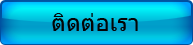
<style>
.page{position:relative;width:193px;height:45px}
.page>*{position:absolute;margin:0}
.t1{font:24px "Tahoma";color:#040404}
</style>
<div class="page">
<p class="t1" style="left:52px;top:13px;width:86px;height:18px">ติดต่อเรา</p>
</div>
